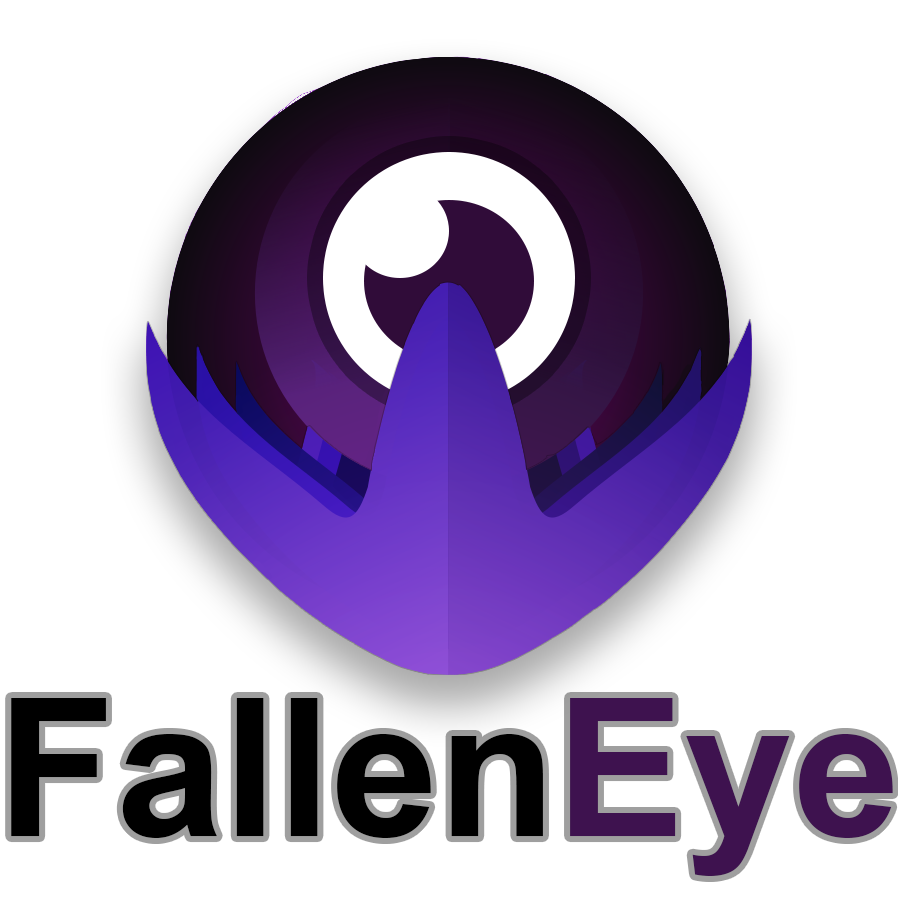
<style>
.page{position:relative;width:898px;height:897px;background:#ffffff}
.page>*{position:absolute;margin:0}
.t1{font:193.4px "Arial-BoldMT";color:#000000}
.t2{font:193.4px "Arial-BoldMT";color:#3e124f}
</style>
<div class="page">
<p class="t1" style="left:11px;top:698px;width:882px;height:178px">Fallen<span class="t2">Eye</span></p>
</div>
